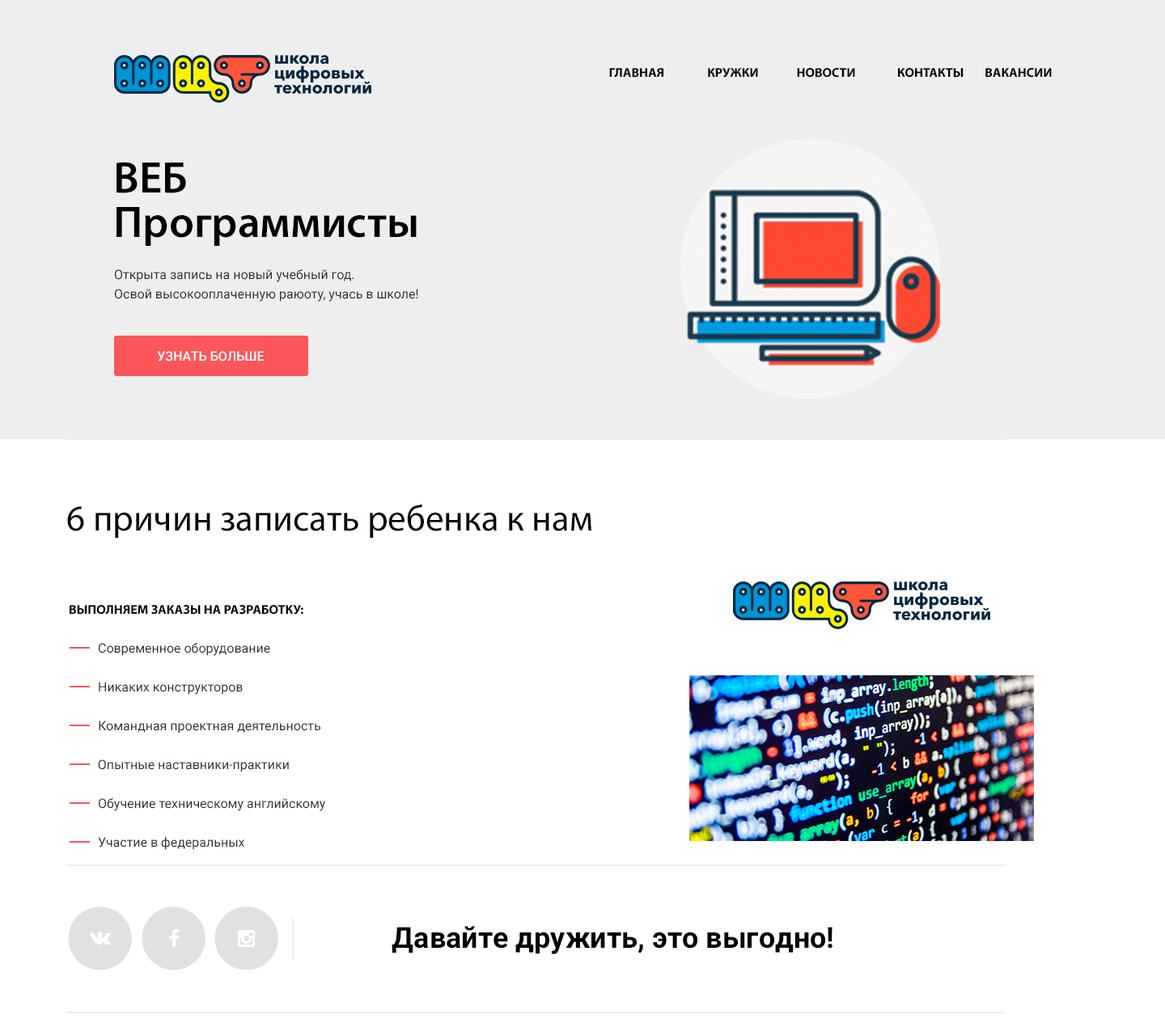
<style>
.page{position:relative;width:1165px;height:1023px;background:#ffffff}
.page>*{position:absolute;margin:0}
.t1{font:12.9px "MyriadPro-Bold";color:#000000;text-transform:uppercase}
.t2{font:44.5px/44.5px "MyriadPro-Semibold";color:#000000}
.t3{font:12.9px/19.4px "Roboto-Regular";color:#283136}
.t4{font:12.9px "Roboto-Medium";color:#ffffff}
.t5{font:36.4px "MyriadPro-Regular";color:#000000}
.t6{font:12.9px/19.4px "MyriadPro-Bold";color:#000000;text-transform:uppercase}
.t7{font:29.1px "Roboto-Bold";color:#000000}
</style>
<div class="page">
<p class="t1" style="left:609px;top:68px;width:54px;height:10px">ГЛАВНАЯ</p>
<p class="t1" style="left:708px;top:68px;width:50px;height:10px">КРУЖКИ</p>
<p class="t1" style="left:797px;top:68px;width:58px;height:10px">НОВОСТИ</p>
<p class="t1" style="left:898px;top:68px;width:66px;height:10px">КОНТАКТЫ</p>
<p class="t1" style="left:985px;top:68px;width:67px;height:10px">ВАКАНСИИ</p>
<p class="t2" style="left:117px;top:162px;width:300px;height:84px">ВЕБ<br>Программисты</p>
<p class="t3" style="left:115px;top:269px;width:303px;height:33px">Открыта запись на новый учебный год.<br>Освой высокооплаченную раюоту, учась в школе!</p>
<p class="t4" style="left:157px;top:351px;width:107px;height:11px">УЗНАТЬ БОЛЬШЕ</p>
<p class="t5" style="left:67px;top:504px;width:524px;height:34px">6 причин записать ребенка к нам</p>
<p class="t3" style="left:70px;top:605px;width:255px;height:245px"><span class="t6">Выполняем заказы на разработку:<br></span><br> Современное оборудование<br><br> Никаких конструкторов<br><br> Командная проектная деятельность<br><br>         Опытные наставники-практики<br><br> Обучение техническому английскому<br><br> Участие в федеральных<br>конкурсах и соревнованиях</p>
<p class="t7" style="left:392px;top:926px;width:441px;height:29px">Давайте дружить, это выгодно!</p>
</div>
